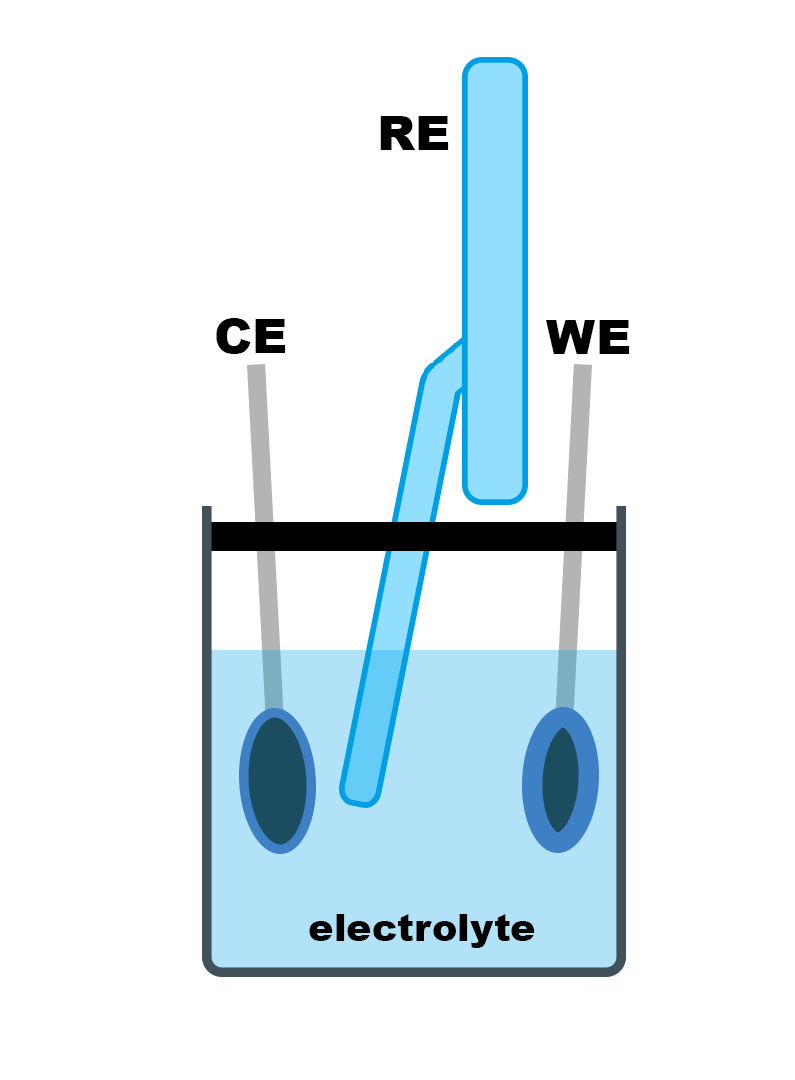
<style>
.page{position:relative;width:795px;height:1080px;background:#ffffff}
.page>*{position:absolute;margin:0}
.t1{font:48px "Arial-Black";color:#000000;scale:1.03 1}
.t2{font:37px "Arial-Black";color:#000000;scale:1.03 1}
</style>
<div class="page">
<p class="t1" style="left:380px;top:116px;width:69px;height:34px">RE</p>
<p class="t1" style="left:216px;top:318px;width:70px;height:36px">CE</p>
<p class="t1" style="left:546px;top:320px;width:84px;height:34px">WE</p>
<p class="t2" style="left:309px;top:914px;width:226px;height:34px">electrolyte</p>
</div>
